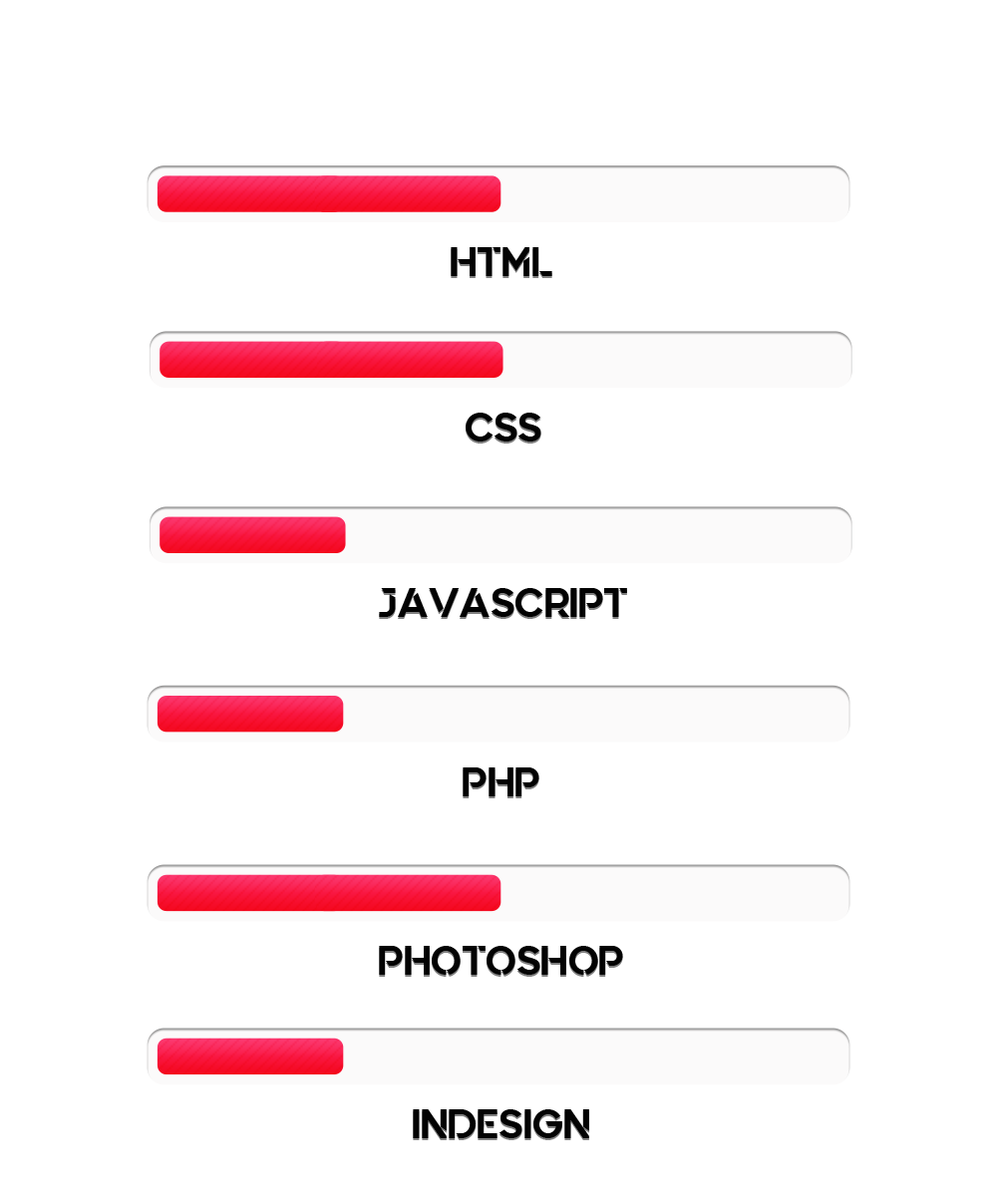
<style>
.page{position:relative;width:997px;height:1196px;background:#ffffff}
.page>*{position:absolute;margin:0}
.t1{font:40.8px "Quantify";color:#030303}
</style>
<div class="page">
<p class="t1" style="left:451px;top:247px;width:101px;height:29px">HTML</p>
<p class="t1" style="left:466px;top:413px;width:75px;height:29px">CSS</p>
<p class="t1" style="left:379px;top:588px;width:248px;height:29px">JAVASCRIPT</p>
<p class="t1" style="left:463px;top:768px;width:76px;height:28px">PHP</p>
<p class="t1" style="left:379px;top:946px;width:244px;height:29px">PHOTOSHOP</p>
<p class="t1" style="left:413px;top:1109px;width:176px;height:29px">INDESIGN</p>
</div>
